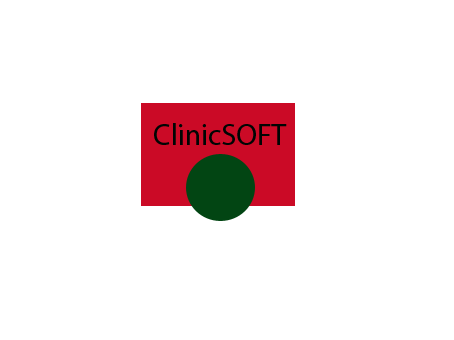
<style>
.page{position:relative;width:454px;height:340px;background:#ffffff}
.page>*{position:absolute;margin:0}
.t1{font:30px "MyriadPro-Regular";color:#000503}
</style>
<div class="page">
<p class="t1" style="left:154px;top:123px;width:133px;height:22px">ClinicSOFT</p>
</div>
